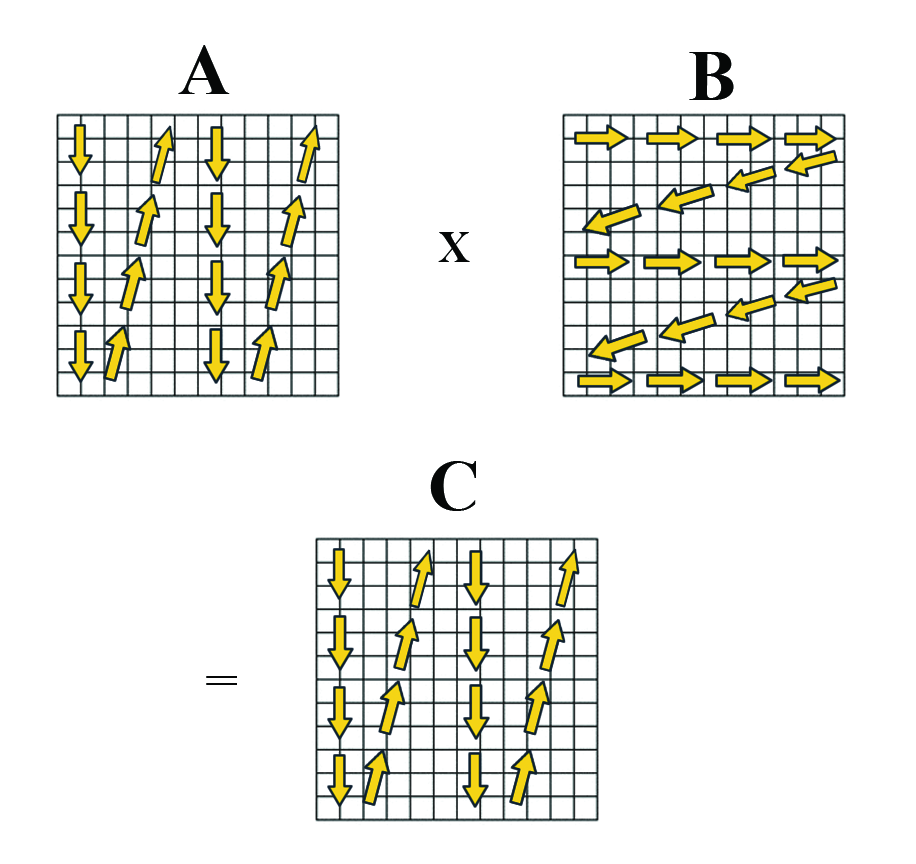
<style>
.page{position:relative;width:916px;height:864px;background:#ffffff}
.page>*{position:absolute;margin:0}
.t1{font:72px "TimesNewRomanPS-BoldMT";color:#060808}
.t2{font:72px "BaskOldFace";color:#060808}
</style>
<div class="page">
<p class="t1" style="left:178px;top:45px;width:52px;height:49px">A</p>
<p class="t1" style="left:689px;top:52px;width:45px;height:48px">B</p>
<p class="t2" style="left:438px;top:232px;width:32px;height:30px">x</p>
<p class="t1" style="left:430px;top:461px;width:46px;height:50px">C</p>
<p class="t2" style="left:206px;top:676px;width:31px;height:9px">=</p>
</div>
